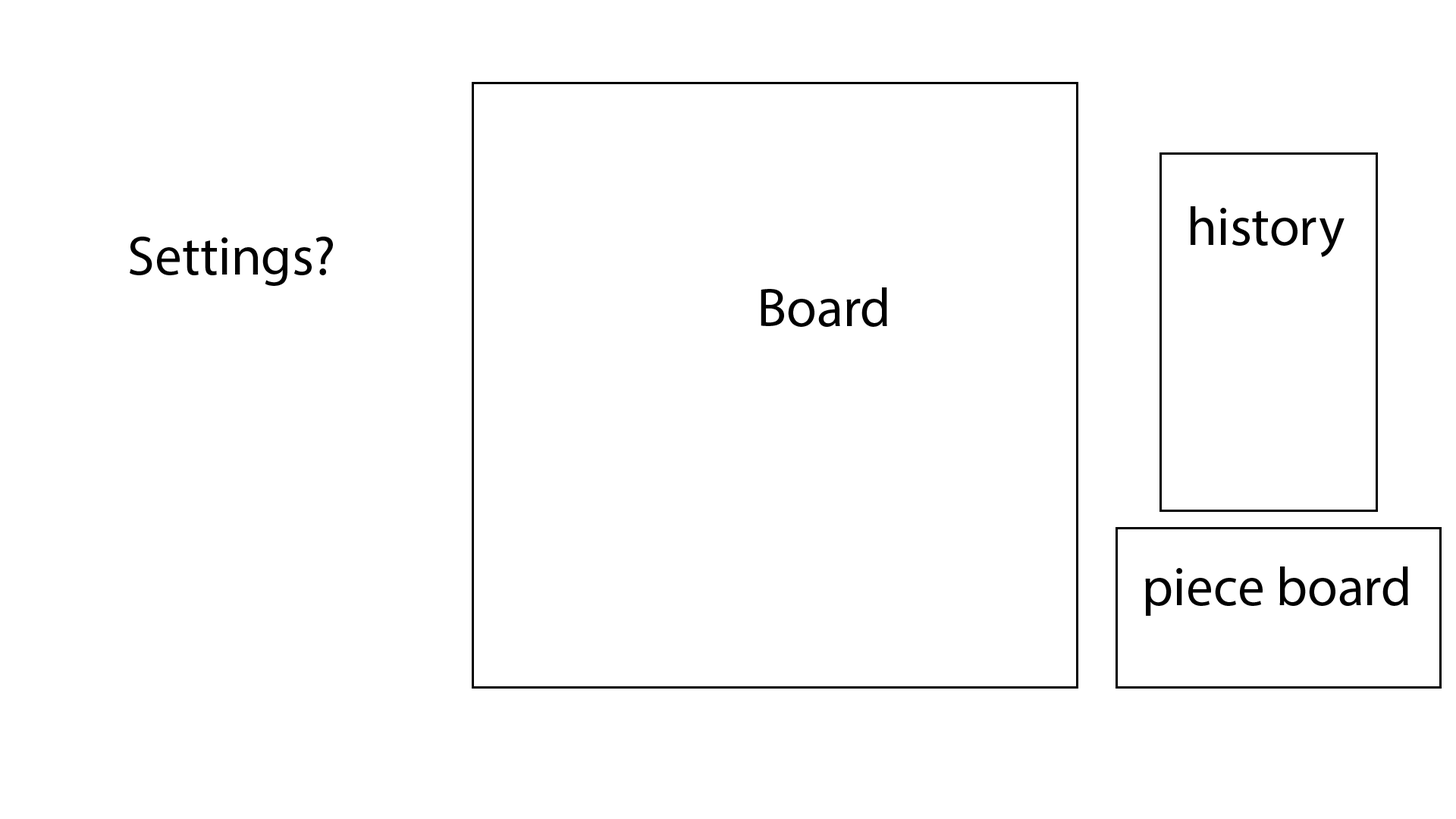
<style>
.page{position:relative;width:1456px;height:819px;background:#ffffff}
.page>*{position:absolute;margin:0}
.t1{font:54.6px "MyriadPro-Regular";color:#000000}
</style>
<div class="page">
<p class="t1" style="left:1191px;top:206px;width:154px;height:51px">history</p>
<p class="t1" style="left:130px;top:237px;width:203px;height:49px">Settings?</p>
<p class="t1" style="left:761px;top:287px;width:126px;height:40px">Board</p>
<p class="t1" style="left:1145px;top:566px;width:263px;height:50px">piece board</p>
</div>
